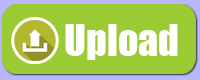
<style>
.page{position:relative;width:200px;height:80px;background:#9acb34}
.page>*{position:absolute;margin:0}
.t1{font:40px "Impact";color:#ffffff}
</style>
<div class="page">
<p class="t1" style="left:65px;top:24px;width:113px;height:36px">Upload</p>
</div>
